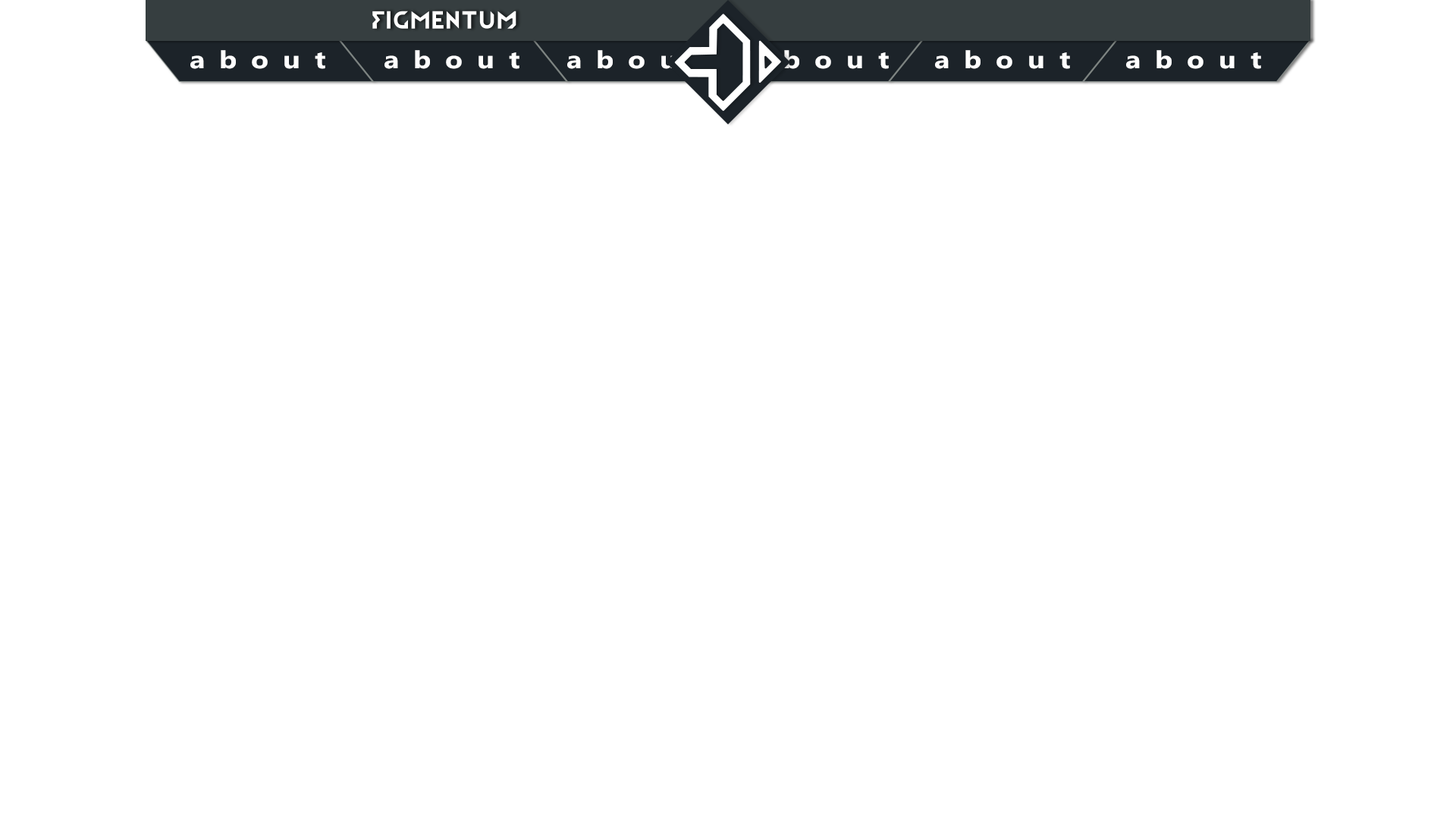
<style>
.page{position:relative;width:1456px;height:819px;background:#ffffff}
.page>*{position:absolute;margin:0}
.t1{font:24.4px "MicrosoftPhagsPa-Bold";letter-spacing:0.5em;color:#ffffff;scale:1.17 1}
</style>
<div class="page">
<p class="t1" style="left:190px;top:50px;width:135px;height:19px">about</p>
<p class="t1" style="left:384px;top:50px;width:135px;height:19px">about</p>
<p class="t1" style="left:567px;top:50px;width:135px;height:19px">about</p>
<p class="t1" style="left:754px;top:50px;width:135px;height:19px">about</p>
<p class="t1" style="left:935px;top:50px;width:135px;height:19px">about</p>
<p class="t1" style="left:1126px;top:50px;width:135px;height:19px">about</p>
</div>
